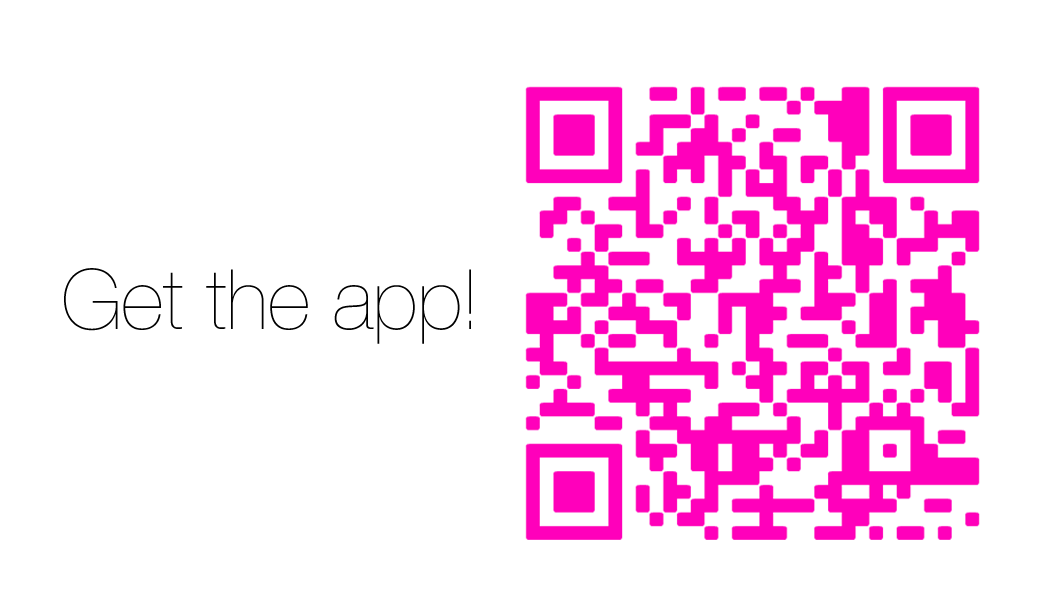
<style>
.page{position:relative;width:1062px;height:615px;background:#ffffff}
.page>*{position:absolute;margin:0}
.t1{font:83.3px "HelveticaNeue-UltraLight";color:#000000}
</style>
<div class="page">
<p class="t1" style="left:64px;top:268px;width:407px;height:76px">Get the app!</p>
</div>
